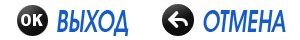
<style>
.page{position:relative;width:300px;height:40px;background:#ffffff}
.page>*{position:absolute;margin:0}
.t1{font:29.7px "AAvanteLtDemiBoldItalic";color:#155cc7;scale:0.73 1}
</style>
<div class="page">
<p class="t1" style="left:57px;top:10px;width:72px;height:26px">ВЫХОД</p>
<p class="t1" style="left:203px;top:10px;width:83px;height:22px">ОТМЕНА</p>
</div>
